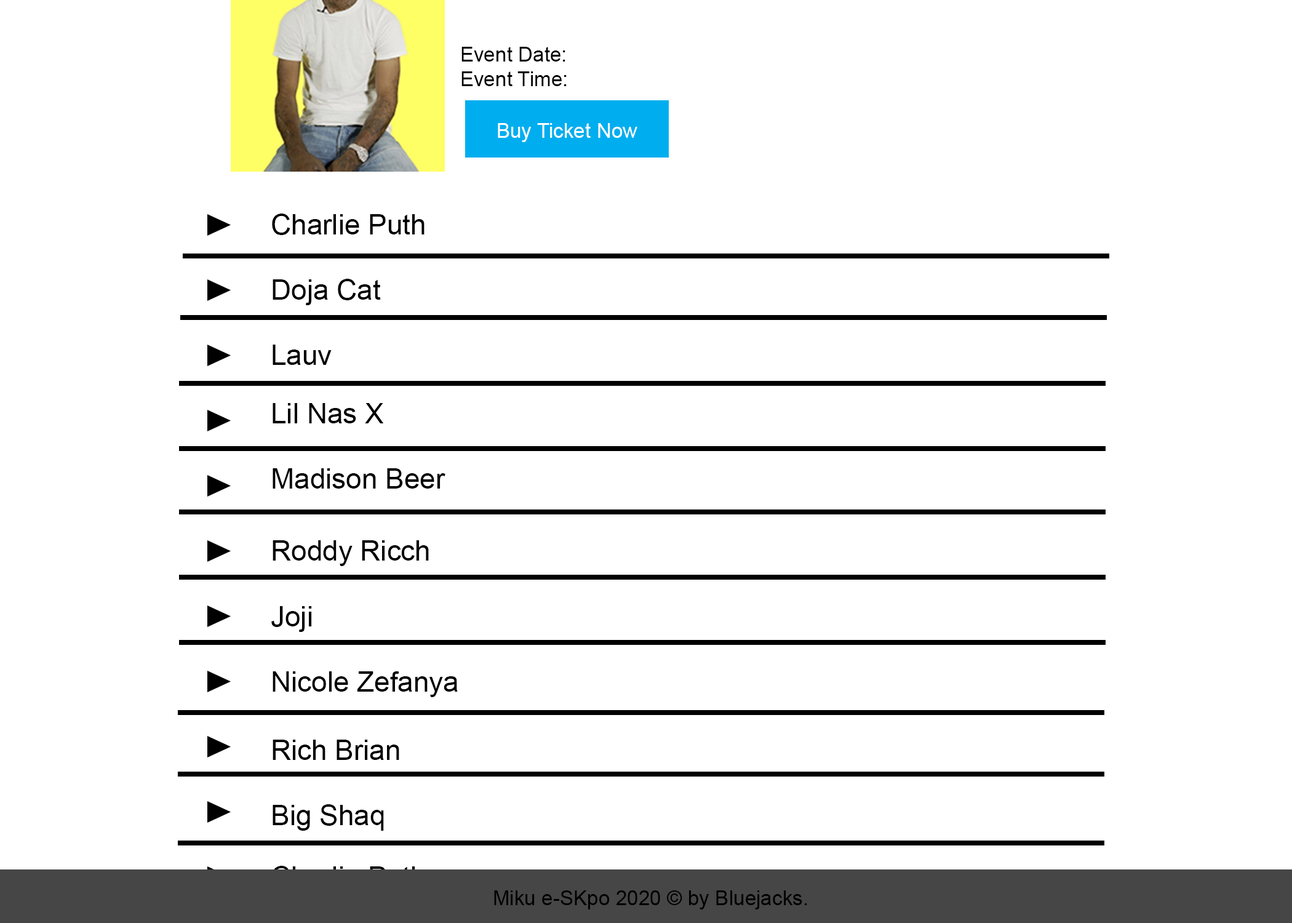
<style>
.page{position:relative;width:1292px;height:923px;background:#ffffff}
.page>*{position:absolute;margin:0}
.t1{font:20.5px "ArialMT";color:#000000}
.t2{font:20.5px "ArialMT";color:#fefefe}
.t3{font:28.2px "ArialMT";color:#000000}
</style>
<div class="page">
<p class="t1" style="left:461px;top:47px;width:106px;height:39px">Event Date:<br>Event Time:</p>
<p class="t2" style="left:498px;top:123px;width:139px;height:19px">Buy Ticket Now</p>
<p class="t3" style="left:272px;top:213px;width:153px;height:22px">Charlie Puth</p>
<p class="t3" style="left:273px;top:279px;width:108px;height:26px">Doja Cat</p>
<p class="t3" style="left:273px;top:345px;width:59px;height:20px">Lauv</p>
<p class="t3" style="left:273px;top:403px;width:111px;height:20px">Lil Nas X</p>
<p class="t3" style="left:273px;top:468px;width:172px;height:21px">Madison Beer</p>
<p class="t3" style="left:273px;top:540px;width:156px;height:26px">Roddy Ricch</p>
<p class="t3" style="left:271px;top:606px;width:41px;height:26px">Joji</p>
<p class="t3" style="left:273px;top:671px;width:185px;height:26px">Nicole Zefanya</p>
<p class="t3" style="left:273px;top:740px;width:126px;height:20px">Rich Brian</p>
<p class="t3" style="left:273px;top:804px;width:111px;height:27px">Big Shaq</p>
<p class="t1" style="left:494px;top:890px;width:313px;height:19px">Miku e-SKpo 2020 © by Bluejacks.</p>
</div>
